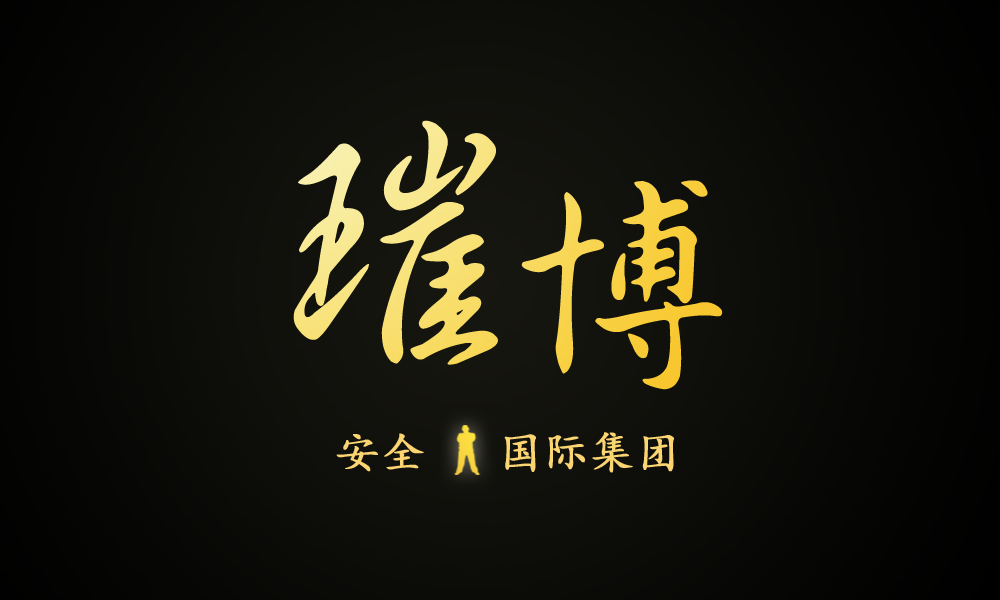
<style>
.page{position:relative;width:1000px;height:600px}
.page>*{position:absolute;margin:0}
.t1{font:302.1px "HanWangShinSuMedium";letter-spacing:-0.16em}
.t2{font:244.5px "HanWangShinSuMedium";letter-spacing:-0.16em}
.t3{font:44.8px "KaiTi";color:#fbd571;font-weight:bold}
</style>
<div class="page">
<p class="t1" style="left:293px;top:120px;width:430px;height:270px">璀<span class="t2">博</span></p>
<p class="t3" style="left:336px;top:432px;width:338px;height:41px">安全   国际集团</p>
</div>
